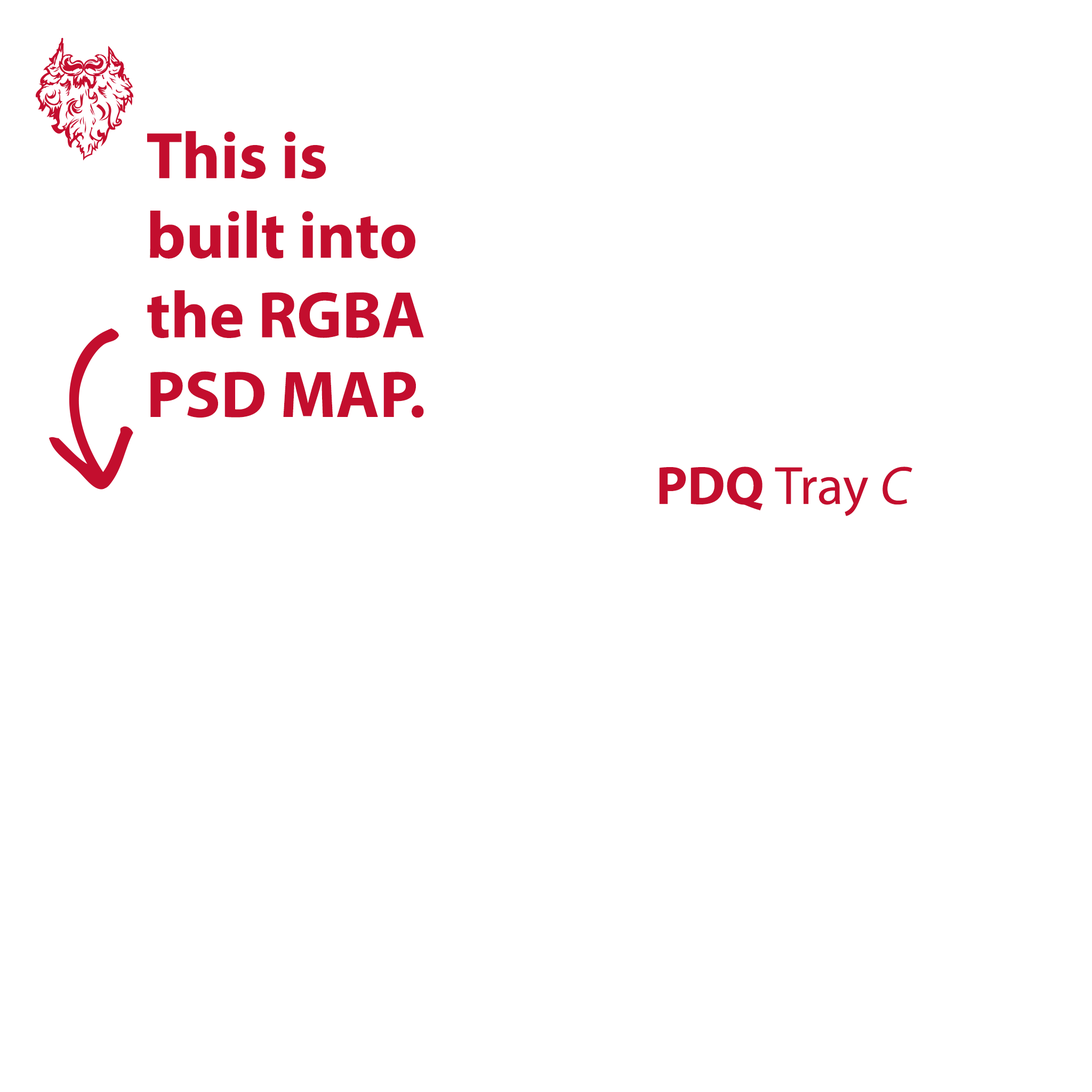
<style>
.page{position:relative;width:1092px;height:1092px;background:#ffffff}
.page>*{position:absolute;margin:0}
.t1{font:66.3px "MyriadPro-Bold";color:#c30e2e}
.t2{font:54.3px "MyriadPro-Regular";color:#c30e2e}
.t3{font:54.3px "MyriadPro-Bold";color:#c30e2e}
.t4{font:54.3px "MyriadPro-It";color:#c30e2e}
</style>
<div class="page">
<p class="t1" style="left:147px;top:131px;width:277px;height:287px">This is<br>built into<br>the RGBA<br>PSD MAP.</p>
<p class="t2" style="left:659px;top:467px;width:253px;height:49px"><span class="t3">PDQ </span>Tray <span class="t4">C</span></p>
</div>
